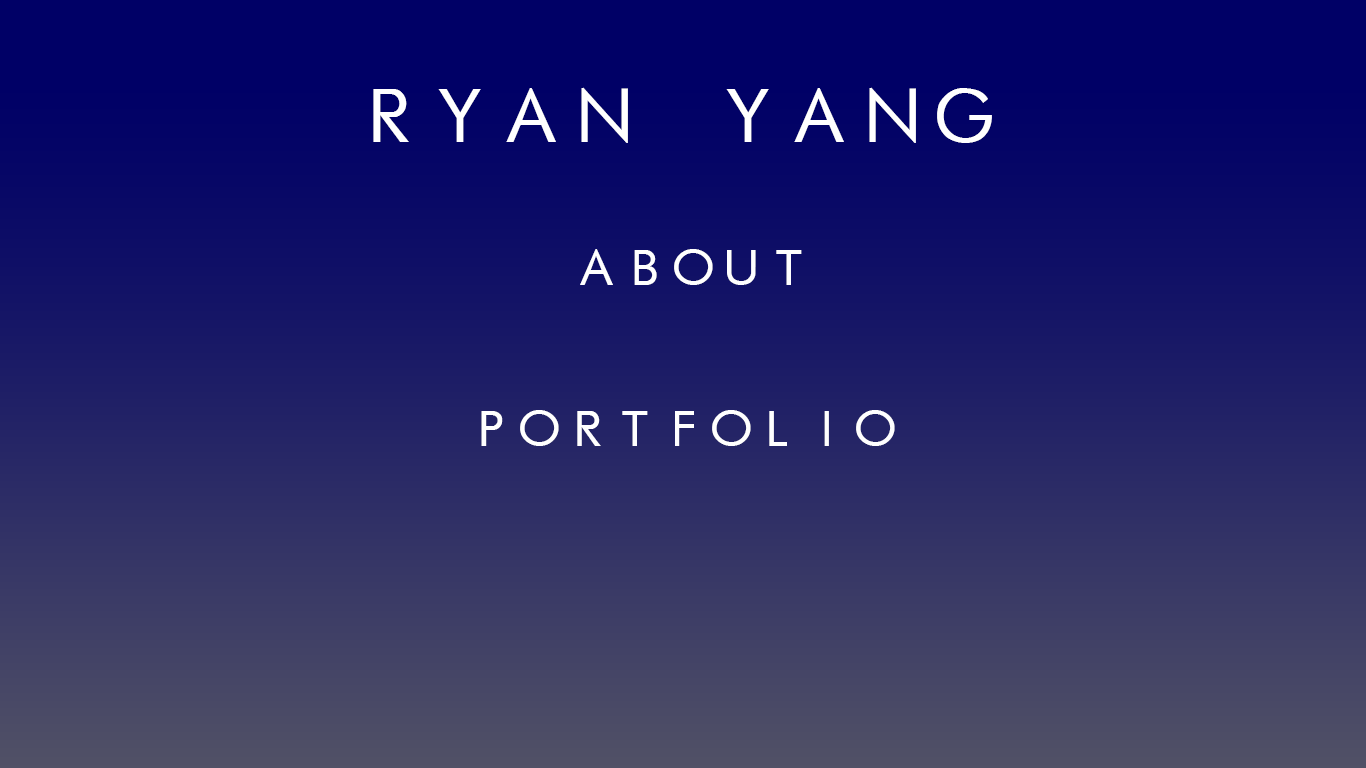
<style>
.page{position:relative;width:1366px;height:768px}
.page>*{position:absolute;margin:0}
.t1{font:72px "FuturistFixedWidth-Regular";color:#ffffff}
.t2{font:48px "FuturistFixedWidth-Regular";color:#ffffff}
</style>
<div class="page">
<p class="t1" style="left:373px;top:87px;width:619px;height:56px">RYAN YANG</p>
<p class="t2" style="left:580px;top:249px;width:222px;height:36px">ABOUT</p>
<p class="t2" style="left:481px;top:410px;width:414px;height:36px">PORTFOLIO</p>
</div>
